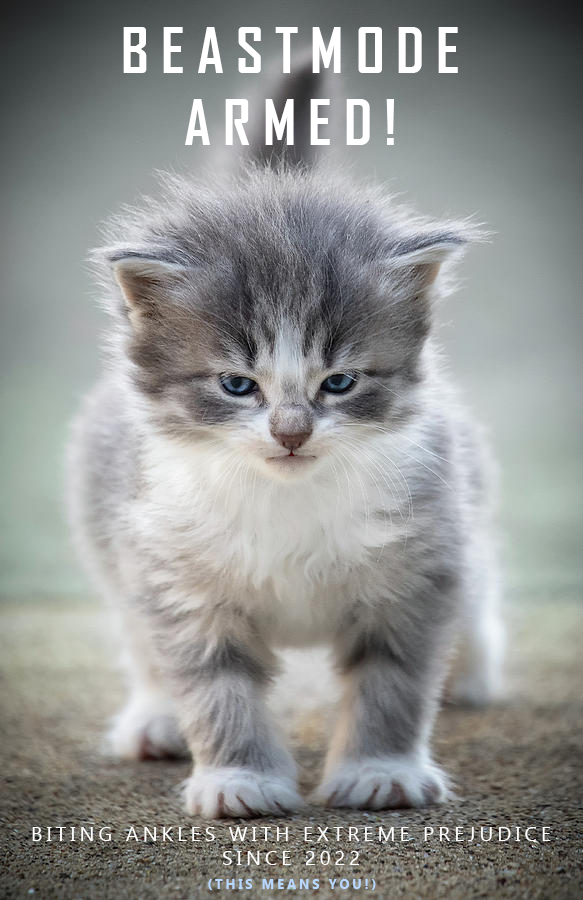
<style>
.page{position:relative;width:583px;height:900px}
.page>*{position:absolute;margin:0}
.t1{font:60px "AgencyFB-Bold";letter-spacing:0.2em;color:#ffffff;text-transform:uppercase}
.t2{font:20px "Gadugi";letter-spacing:0.2em;color:#ffffff;text-transform:uppercase}
.t3{font:13.3px "Gadugi-Bold";letter-spacing:0.2em;color:#b8d8ff;text-transform:uppercase}
</style>
<div class="page">
<p class="t1" style="left:123px;top:27px;width:335px;height:118px;text-align:center">Beastmode<br>Armed!</p>
<p class="t2" style="left:32px;top:827px;width:519px;height:38px;text-align:center">Biting ankles with extreme prejudice<br>Since 2022</p>
<p class="t3" style="left:208px;top:879px;width:168px;height:11px">(This means you!)</p>
</div>
